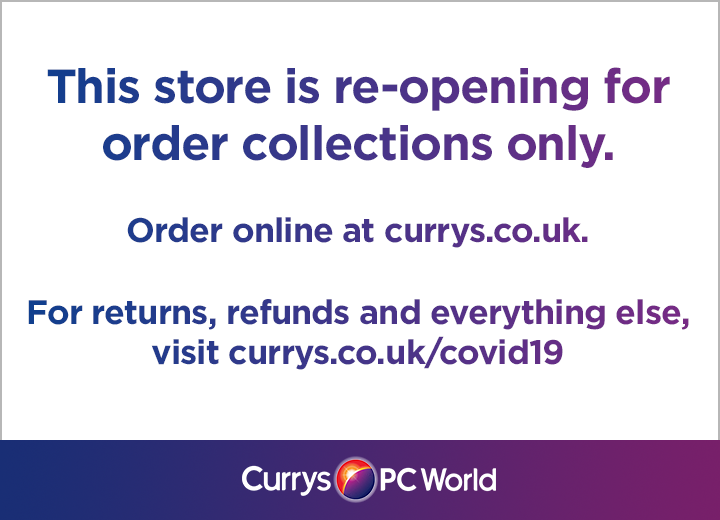
<style>
.page{position:relative;width:720px;height:520px;background:#ffffff}
.page>*{position:absolute;margin:0}
.t1{font:34px "Gotham-Bold";letter-spacing:-0.025em}
.t2{font:48px "Gotham-Bold";letter-spacing:-0.025em}
</style>
<div class="page">
<p class="t1" style="left:28px;top:67px;width:661px;height:303px;text-align:center"><span class="t2"><br>This store is re-opening for <br>order collections only. <br></span><br>Order online at currys.co.uk.<br> <br>For returns, refunds and everything else, visit currys.co.uk/covid19</p>
</div>
